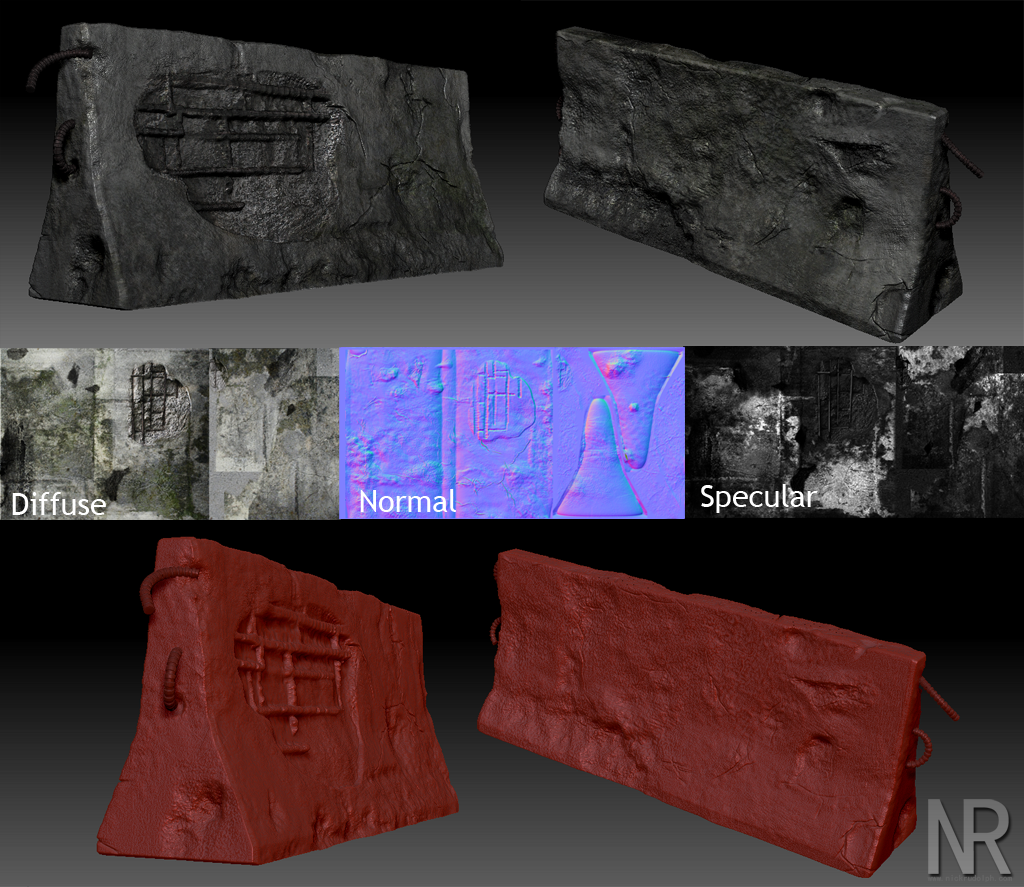
<style>
.page{position:relative;width:1024px;height:887px}
.page>*{position:absolute;margin:0}
.t1{font:30.6px "TrebuchetMS";color:#ffffff}
.t2{font:8.9px "SimHei";color:#666666}
</style>
<div class="page">
<p class="t1" style="left:701px;top:484px;width:117px;height:29px">Specular</p>
<p class="t1" style="left:12px;top:492px;width:94px;height:23px">Diffuse</p>
<p class="t1" style="left:360px;top:489px;width:96px;height:23px">Normal</p>
<p class="t2" style="left:927px;top:874px;width:85px;height:8px">www.nickrudolph.com</p>
</div>
